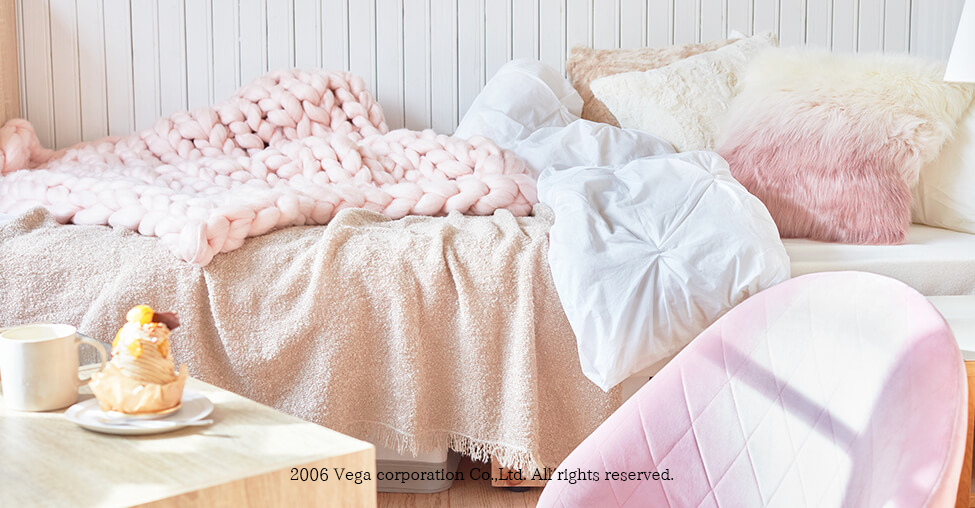
<style>
.page{position:relative;width:975px;height:508px}
.page>*{position:absolute;margin:0}
.t1{font:16px "Honoka-Mincho";color:#000000}
</style>
<div class="page">
<p class="t1" style="left:290px;top:468px;width:384px;height:16px">Ⓒ 2006 Vega corporation Co.,Ltd. All rights reserved.</p>
</div>
